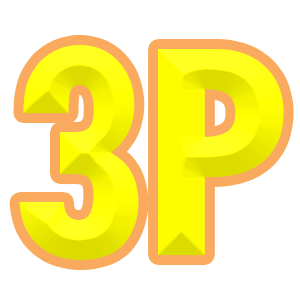
<style>
.page{position:relative;width:300px;height:300px;background:#ffffff}
.page>*{position:absolute;margin:0}
.t1{font:316px "TwCenMT-CondensedExtraBold";letter-spacing:-0.06em;color:#ffff00}
</style>
<div class="page">
<p class="t1" style="left:19px;top:45px;width:265px;height:215px">3P</p>
</div>
